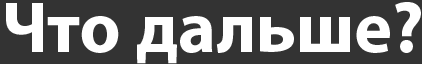
<style>
.page{position:relative;width:422px;height:64px;background:#333333}
.page>*{position:absolute;margin:0}
.t1{font:72px "MyriadPro-Bold";color:#ffffff}
</style>
<div class="page">
<p class="t1" style="left:6px;top:2px;width:415px;height:62px">Что дальше?</p>
</div>
